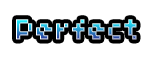
<style>
.page{position:relative;width:155px;height:60px;background:#ffffff}
.page>*{position:absolute;margin:0}
.t1{font:32px "04b03"}
</style>
<div class="page">
<p class="t1" style="left:16px;top:19px;width:121px;height:21px">Perfect</p>
<p class="t1" style="left:16px;top:19px;width:121px;height:21px">Perfect</p>
<p class="t1" style="left:16px;top:19px;width:121px;height:21px">Perfect</p>
</div>
